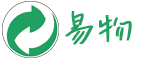
<style>
.page{position:relative;width:150px;height:59px;background:#ffffff}
.page>*{position:absolute;margin:0}
.t1{font:48px "HanyiSentyMeadow";color:#21a161;font-weight:bold}
</style>
<div class="page">
<p class="t1" style="left:65px;top:11px;width:67px;height:34px">易物</p>
</div>
